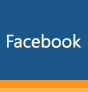
<style>
.page{position:relative;width:88px;height:92px;background:#1c578b}
.page>*{position:absolute;margin:0}
.t1{font:18px "SegoeUI";color:#ffffff}
</style>
<div class="page">
<p class="t1" style="left:7px;top:34px;width:75px;height:14px">Facebook</p>
</div>
